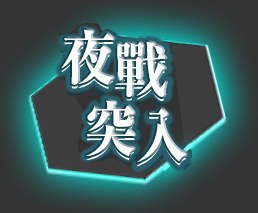
<style>
.page{position:relative;width:258px;height:213px}
.page>*{position:absolute;margin:0}
.t1{font:60px "RyuminPr6N-ExBold";color:#ffffff;scale:0.92 1}
.t2{font:60px "RyuminPr6N-ExBold";color:#ffffff;scale:0.91 1}
.t3{font:60px "RyuminPr6N-ExBold";color:#ffffff;scale:0.88 1}
</style>
<div class="page">
<p class="t1" style="left:61px;top:29px;width:53px;height:56px">夜</p>
<p class="t1" style="left:61px;top:31px;width:53px;height:56px">夜</p>
<p class="t2" style="left:115px;top:41px;width:51px;height:56px">戰</p>
<p class="t2" style="left:117px;top:41px;width:51px;height:56px">戰</p>
<p class="t3" style="left:86px;top:100px;width:49px;height:57px">突</p>
<p class="t3" style="left:86px;top:100px;width:49px;height:57px">突</p>
<p class="t3" style="left:137px;top:112px;width:49px;height:55px">入</p>
<p class="t3" style="left:137px;top:108px;width:49px;height:55px">入</p>
</div>
